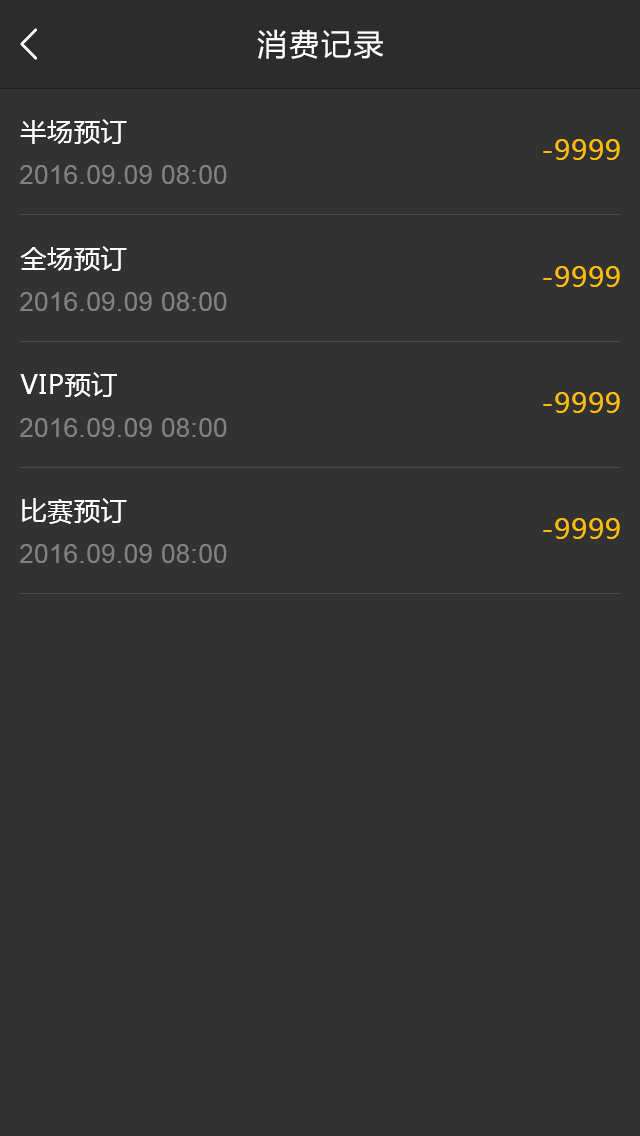
<style>
.page{position:relative;width:640px;height:1136px;background:#323232}
.page>*{position:absolute;margin:0}
.t1{font:30px "MicrosoftYaHei";letter-spacing:0.07em;color:#ffffff}
.t2{font:26px "MicrosoftYaHei";letter-spacing:0.03em;color:#ffffff}
.t3{font:28px "MicrosoftYaHei";letter-spacing:0.03em;color:#fdbd06}
.t4{font:26px "ArialMT";letter-spacing:0.03em;color:#818181}
</style>
<div class="page">
<p class="t1" style="left:257px;top:29px;width:127px;height:30px">消费记录</p>
<p class="t2" style="left:20px;top:119px;width:107px;height:25px">半场预订</p>
<p class="t3" style="left:543px;top:139px;width:77px;height:21px">-9999</p>
<p class="t4" style="left:20px;top:165px;width:207px;height:19px">2016.09.09 08:00</p>
<p class="t2" style="left:20px;top:246px;width:107px;height:25px">全场预订</p>
<p class="t3" style="left:543px;top:266px;width:77px;height:21px">-9999</p>
<p class="t4" style="left:20px;top:292px;width:207px;height:19px">2016.09.09 08:00</p>
<p class="t2" style="left:20px;top:372px;width:97px;height:25px">VIP预订</p>
<p class="t3" style="left:543px;top:392px;width:77px;height:21px">-9999</p>
<p class="t4" style="left:20px;top:418px;width:207px;height:19px">2016.09.09 08:00</p>
<p class="t2" style="left:21px;top:498px;width:106px;height:26px">比赛预订</p>
<p class="t3" style="left:543px;top:518px;width:77px;height:21px">-9999</p>
<p class="t4" style="left:20px;top:544px;width:207px;height:19px">2016.09.09 08:00</p>
</div>
